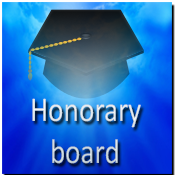
<style>
.page{position:relative;width:175px;height:175px}
.page>*{position:absolute;margin:0}
.t1{font:34.9px "Calibri";color:#d9e1e6;scale:0.84 1}
</style>
<div class="page">
<p class="t1" style="left:32px;top:98px;width:109px;height:66px">Honorary <br>   board</p>
</div>
